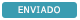
<style>
.page{position:relative;width:80px;height:20px;background:#3a9cb1}
.page>*{position:absolute;margin:0}
.t1{font:9px "WineTahomaBold";color:#fcf8f8}
</style>
<div class="page">
<p class="t1" style="left:18px;top:6px;width:42px;height:8px">ENVIADO</p>
</div>
